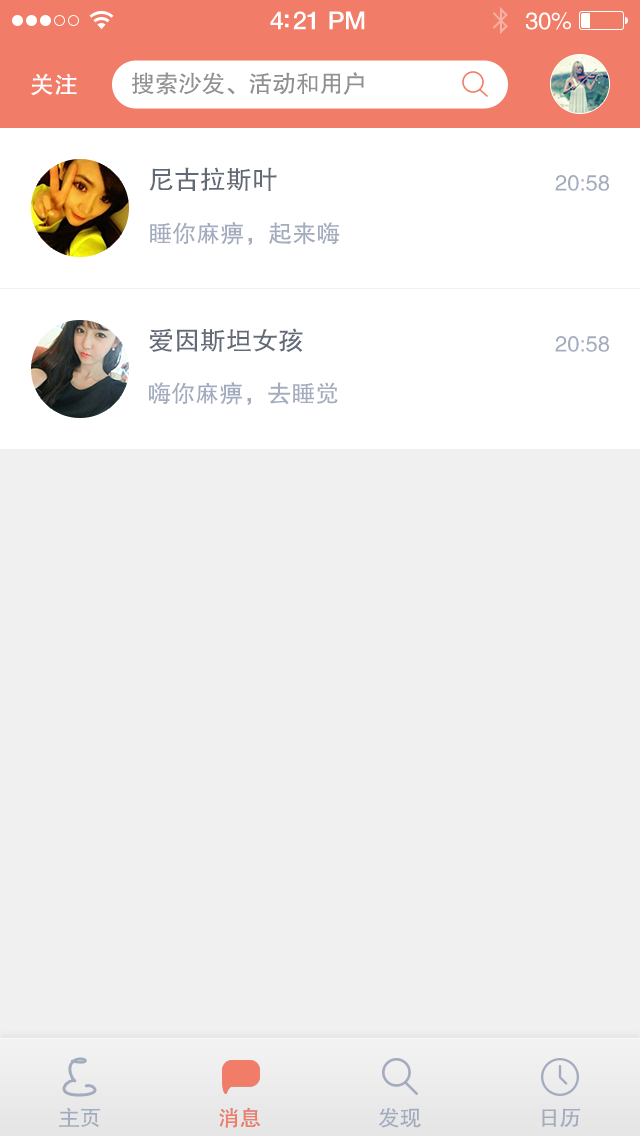
<style>
.page{position:relative;width:640px;height:1136px;background:#f0f0f0}
.page>*{position:absolute;margin:0}
.t1{font:25px "HelveticaNeue-Medium";letter-spacing:-0.02em;color:#ffffff}
.t2{font:24px "FZHTJW--GB1-0";letter-spacing:-0.02em;color:#ffffff}
.t3{font:24px "FZHTJW--GB1-0";color:#ffffff}
.t4{font:24px "FZHTJW--GB1-0";letter-spacing:-0.02em;color:#909090}
.t5{font:26px "FZHTJW--GB1-0";color:#626a77}
.t6{font:22px "FZHTJW--GB1-0";color:#a3abbe}
.t7{font:24px "FZHTJW--GB1-0";color:#a3abbe}
.t8{font:22px "FZHTJW--GB1-0";letter-spacing:-0.02em;color:#a3abbe}
.t9{font:22px "FZHTJW--GB1-0";letter-spacing:-0.02em;color:#f17c67}
</style>
<div class="page">
<p class="t1" style="left:270px;top:11px;width:95px;height:19px">4:21 PM</p>
<p class="t2" style="left:525px;top:12px;width:46px;height:18px">30%</p>
<p class="t3" style="left:31px;top:73px;width:46px;height:23px">关注</p>
<p class="t4" style="left:132px;top:72px;width:232px;height:23px">搜索沙发、活动和用户</p>
<p class="t5" style="left:149px;top:167px;width:128px;height:24px">尼古拉斯叶</p>
<p class="t6" style="left:555px;top:175px;width:54px;height:16px">20:58</p>
<p class="t7" style="left:150px;top:222px;width:190px;height:23px">睡你麻痹，起来嗨</p>
<p class="t5" style="left:149px;top:328px;width:154px;height:24px">爱因斯坦女孩</p>
<p class="t6" style="left:555px;top:336px;width:54px;height:16px">20:58</p>
<p class="t7" style="left:148px;top:382px;width:190px;height:23px">嗨你麻痹，去睡觉</p>
<p class="t8" style="left:59px;top:1107px;width:41px;height:20px">主页</p>
<p class="t9" style="left:219px;top:1107px;width:41px;height:21px">消息</p>
<p class="t9" style="left:219px;top:1107px;width:41px;height:21px">消息</p>
<p class="t8" style="left:378px;top:1108px;width:43px;height:20px">发现</p>
<p class="t8" style="left:542px;top:1108px;width:38px;height:19px">日历</p>
</div>
